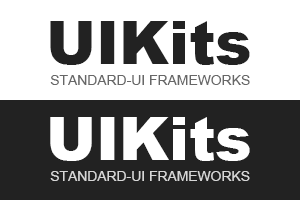
<style>
.page{position:relative;width:300px;height:200px;background:#ffffff}
.page>*{position:absolute;margin:0}
.t1{font:59.8px "Arial-Black";color:#222222}
.t2{font:13.9px "ArialMT";color:#676767}
.t3{font:59.8px "Arial-Black";color:#ffffff}
.t4{font:13.9px "ArialMT";color:#d7d7d7}
</style>
<div class="page">
<p class="t1" style="left:50px;top:21px;width:200px;height:44px">UIKits</p>
<p class="t2" style="left:50px;top:75px;width:200px;height:10px">STANDARD-UI FRAMEWORKS</p>
<p class="t3" style="left:50px;top:117px;width:200px;height:44px">UIKits</p>
<p class="t4" style="left:50px;top:171px;width:200px;height:10px">STANDARD-UI FRAMEWORKS</p>
</div>
